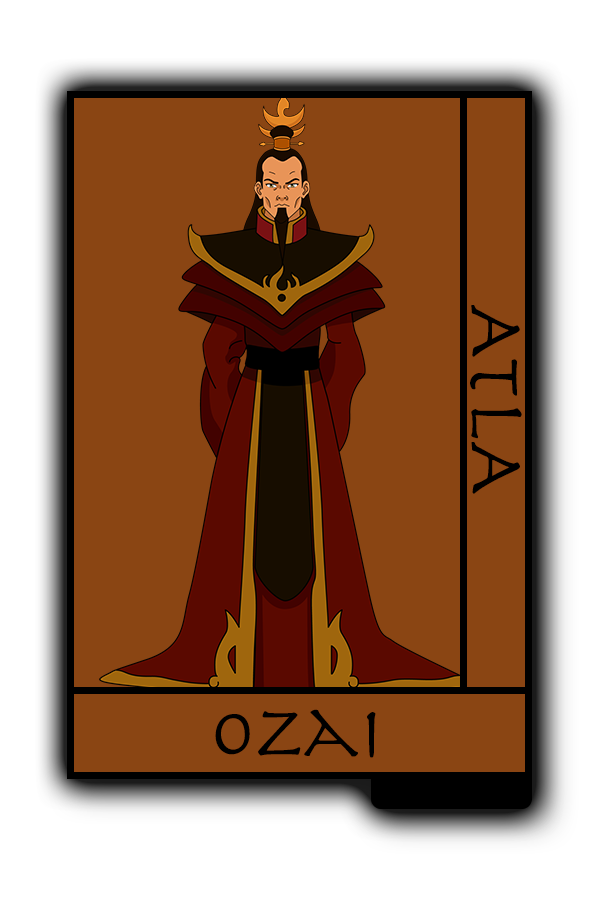
<style>
.page{position:relative;width:600px;height:900px;background:#8a4513}
.page>*{position:absolute;margin:0}
.t1{font:80.7px "Herculanum";color:#000000}
.t2{font:75px "Herculanum";color:#000000}
</style>
<div class="page">
<p class="t1" style="left:470px;top:305px;width:52px;height:189px;rotate:90deg">ATLA</p>
<p class="t2" style="left:215px;top:709px;width:161px;height:49px">ozai</p>
</div>
